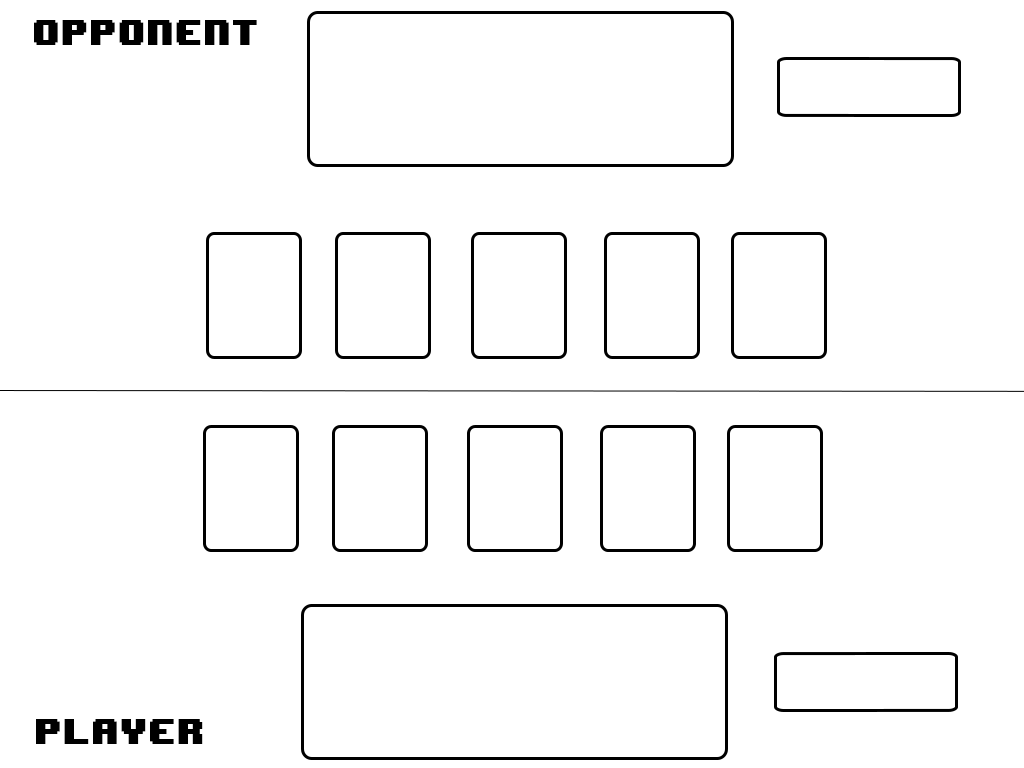
<style>
.page{position:relative;width:1024px;height:768px;background:#ffffff}
.page>*{position:absolute;margin:0}
.t1{font:30px "8BITWONDERNominal";color:#000000;scale:0.95 1}
</style>
<div class="page">
<p class="t1" style="left:34px;top:20px;width:223px;height:25px">OPPONENT</p>
<p class="t1" style="left:36px;top:719px;width:167px;height:25px">PLAYER</p>
</div>
